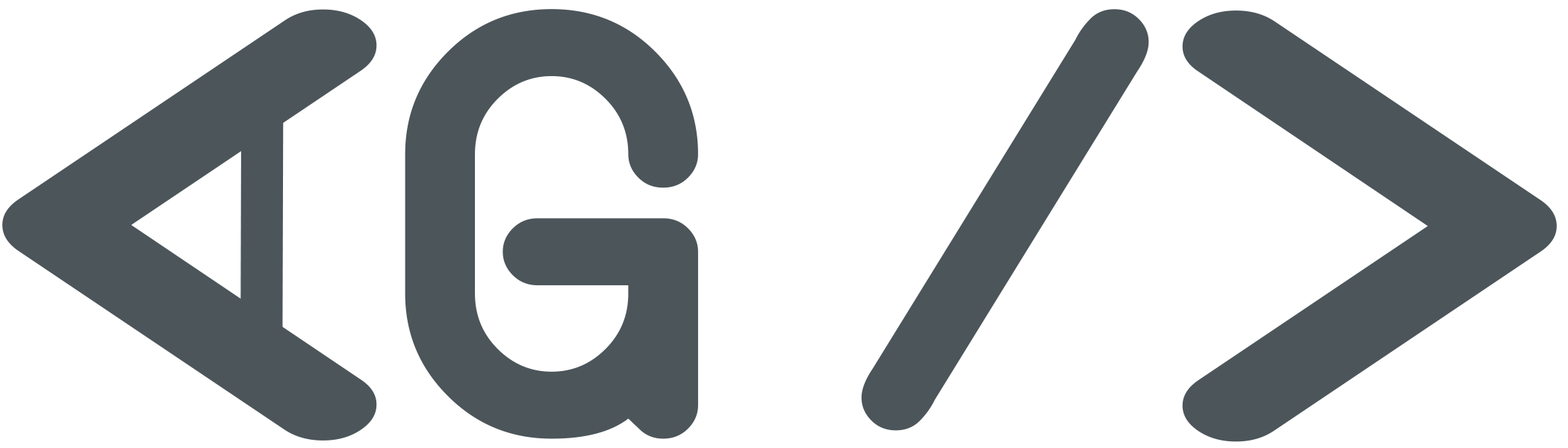
<style>
.page{position:relative;width:1568px;height:448px;background:#ffffff}
.page>*{position:absolute;margin:0}
.t1{font:735.2px "Instruction";color:#4b555a;scale:1.49 1}
.t2{font:571px "Instruction-Bold";color:#4b555a}
.t3{font:559.7px "Instruction-Bold";color:#4b555a}
.t4{font:339.4px "Instruction-Bold";color:#4b555a}
</style>
<div class="page">
<p class="t1" style="left:2px;top:9px;width:375px;height:432px">&lt;</p>
<p class="t2" style="left:405px;top:9px;width:293px;height:430px">G</p>
<p class="t3" style="left:861px;top:9px;width:288px;height:422px">/</p>
<p class="t1" style="left:1182px;top:10px;width:375px;height:432px;rotate:180deg">&lt;</p>
<p class="t4" style="left:240px;top:74px;width:44px;height:294px;rotate:-31deg">/</p>
</div>
